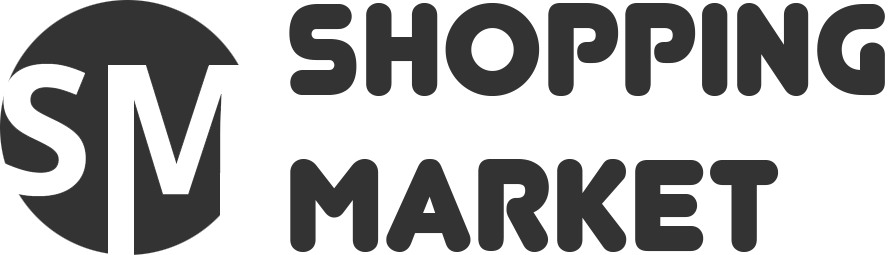
<style>
.page{position:relative;width:888px;height:255px;background:#ffffff}
.page>*{position:absolute;margin:0}
.t1{font:130px "Junegull-Regular";color:#333333;text-transform:uppercase}
</style>
<div class="page">
<p class="t1" style="left:289px;top:3px;width:596px;height:249px">Shopping<br>market</p>
</div>
